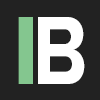
<style>
.page{position:relative;width:100px;height:100px;background:#222222}
.page>*{position:absolute;margin:0}
.t1{font:100px "ProximaNova-Bold";letter-spacing:-0.1em;color:#84c68f}
.t2{font:99.9px "ProximaNova-Bold";letter-spacing:-0.1em;color:#ffffff;scale:0.85 1}
</style>
<div class="page">
<p class="t1" style="left:18px;top:17px;width:15px;height:67px">I</p>
<p class="t2" style="left:38px;top:17px;width:47px;height:67px">B</p>
</div>
